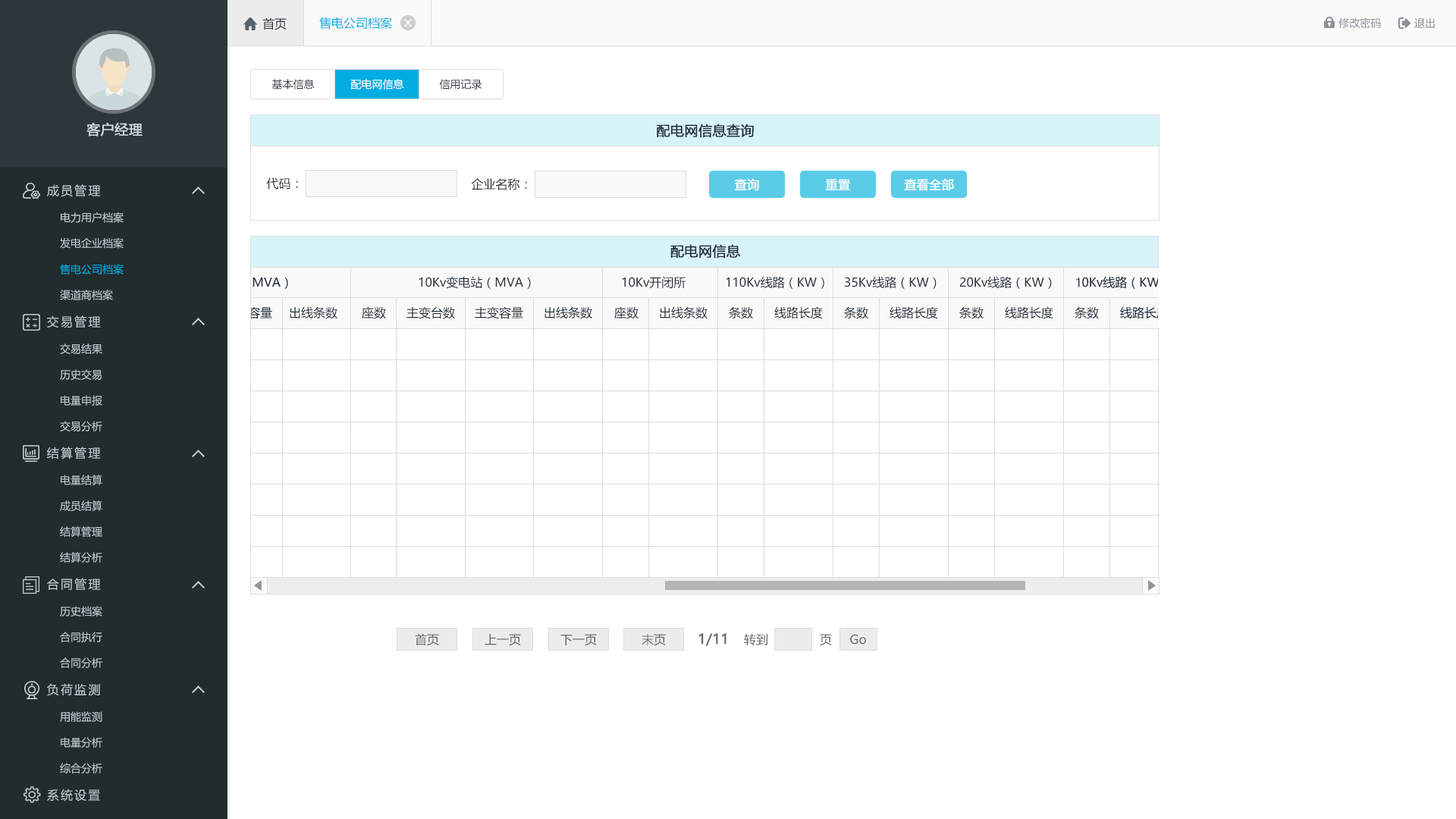
<style>
.page{position:relative;width:1456px;height:819px;background:#ffffff}
.page>*{position:absolute;margin:0}
.t1{font:12.1px "MicrosoftYaHei";color:#242e3b}
.t2{font:12.1px "MicrosoftYaHei";color:#00ace2}
.t3{font:10.6px "MicrosoftYaHei";color:#8a8f99}
.t4{font:10.6px "MicrosoftYaHei";color:#242e3b}
.t5{font:10.6px "MicrosoftYaHei";color:#ffffff}
.t6{font:13.6px "MicrosoftYaHei";color:#d1dce2;font-weight:bold}
.t7{font:13.6px "MicrosoftYaHei";color:#242e3b;font-weight:bold}
.t8{font:12.1px "MicrosoftYaHei";letter-spacing:0.14em;color:#c2cdd2}
.t9{font:12.1px "MicrosoftYaHei";color:#333333}
.t10{font:12.1px "MicrosoftYaHei";color:#ffffff;font-weight:bold}
.t11{font:10.6px "MicrosoftYaHei";color:#c2cdd2}
.t12{font:10.6px "MicrosoftYaHei";color:#00ace2}
.t13{font:12.1px "MicrosoftYaHei";color:#61656b}
.t14{font:13.6px "MicrosoftYaHei";color:#61656b;font-weight:bold}
</style>
<div class="page">
<p class="t1" style="left:262px;top:17px;width:25px;height:13px">首页</p>
<p class="t2" style="left:319px;top:17px;width:73px;height:13px">售电公司档案</p>
<p class="t3" style="left:1338px;top:17px;width:43px;height:12px">修改密码</p>
<p class="t3" style="left:1414px;top:17px;width:21px;height:11px">退出</p>
<p class="t4" style="left:271px;top:79px;width:44px;height:10px">基本信息</p>
<p class="t5" style="left:350px;top:79px;width:54px;height:10px">配电网信息</p>
<p class="t4" style="left:439px;top:79px;width:43px;height:10px">信用记录</p>
<p class="t6" style="left:86px;top:122px;width:57px;height:14px">客户经理</p>
<p class="t7" style="left:656px;top:124px;width:98px;height:14px">配电网信息查询</p>
<p class="t8" style="left:47px;top:184px;width:54px;height:13px">成员管理</p>
<p class="t9" style="left:266px;top:177px;width:32px;height:13px">代码：</p>
<p class="t9" style="left:471px;top:178px;width:56px;height:12px">企业名称：</p>
<p class="t10" style="left:734px;top:178px;width:25px;height:12px">查询</p>
<p class="t10" style="left:825px;top:180px;width:26px;height:12px">重置</p>
<p class="t10" style="left:825px;top:179px;width:26px;height:11px">重置</p>
<p class="t10" style="left:904px;top:178px;width:50px;height:13px">查看全部</p>
<p class="t11" style="left:61px;top:212px;width:63px;height:11px">电力用户档案</p>
<p class="t11" style="left:60px;top:237px;width:64px;height:12px">发电企业档案</p>
<p class="t7" style="left:670px;top:244px;width:71px;height:15px">配电网信息</p>
<p class="t12" style="left:60px;top:264px;width:64px;height:11px">售电公司档案</p>
<p class="t1" style="left:419px;top:276px;width:112px;height:13px">10Kv变电站（MVA）</p>
<p class="t1" style="left:622px;top:276px;width:64px;height:13px">10Kv开闭所</p>
<p class="t1" style="left:726px;top:276px;width:98px;height:13px">110Kv线路（KW）</p>
<p class="t1" style="left:845px;top:276px;width:92px;height:13px">35Kv线路（KW）</p>
<p class="t1" style="left:960px;top:276px;width:92px;height:13px">20Kv线路（KW）</p>
<p class="t1" style="left:1076px;top:278px;width:4px;height:9px">1</p>
<p class="t11" style="left:60px;top:290px;width:53px;height:10px">渠道商档案</p>
<p class="t8" style="left:47px;top:315px;width:54px;height:13px">交易管理</p>
<p class="t1" style="left:290px;top:306px;width:47px;height:13px">出线条数</p>
<p class="t1" style="left:362px;top:306px;width:24px;height:13px">座数</p>
<p class="t1" style="left:406px;top:306px;width:49px;height:13px">主变台数</p>
<p class="t1" style="left:475px;top:306px;width:48px;height:13px">主变容量</p>
<p class="t1" style="left:544px;top:306px;width:48px;height:13px">出线条数</p>
<p class="t1" style="left:614px;top:306px;width:25px;height:13px">座数</p>
<p class="t1" style="left:660px;top:306px;width:48px;height:13px">出线条数</p>
<p class="t1" style="left:729px;top:306px;width:24px;height:13px">条数</p>
<p class="t1" style="left:774px;top:306px;width:49px;height:13px">线路长度</p>
<p class="t1" style="left:844px;top:306px;width:24px;height:13px">条数</p>
<p class="t1" style="left:890px;top:306px;width:48px;height:13px">线路长度</p>
<p class="t1" style="left:959px;top:306px;width:25px;height:13px">条数</p>
<p class="t1" style="left:1005px;top:306px;width:48px;height:13px">线路长度</p>
<p class="t1" style="left:1075px;top:306px;width:24px;height:13px">条数</p>
<p class="t11" style="left:60px;top:344px;width:42px;height:10px">交易结果</p>
<p class="t11" style="left:60px;top:369px;width:42px;height:11px">历史交易</p>
<p class="t11" style="left:61px;top:395px;width:41px;height:11px">电量申报</p>
<p class="t11" style="left:60px;top:421px;width:42px;height:10px">交易分析</p>
<p class="t8" style="left:47px;top:447px;width:54px;height:13px">结算管理</p>
<p class="t11" style="left:61px;top:475px;width:41px;height:10px">电量结算</p>
<p class="t11" style="left:60px;top:500px;width:42px;height:11px">成员结算</p>
<p class="t11" style="left:60px;top:526px;width:42px;height:11px">结算管理</p>
<p class="t11" style="left:60px;top:552px;width:42px;height:11px">结算分析</p>
<p class="t8" style="left:47px;top:578px;width:54px;height:12px">合同管理</p>
<p class="t11" style="left:60px;top:606px;width:42px;height:11px">历史档案</p>
<p class="t11" style="left:60px;top:632px;width:42px;height:10px">合同执行</p>
<p class="t13" style="left:415px;top:633px;width:24px;height:13px">首页</p>
<p class="t13" style="left:485px;top:634px;width:36px;height:12px">上一页</p>
<p class="t13" style="left:560px;top:634px;width:37px;height:12px">下一页</p>
<p class="t13" style="left:642px;top:633px;width:24px;height:13px">末页</p>
<p class="t14" style="left:698px;top:633px;width:28px;height:13px">1/11</p>
<p class="t13" style="left:744px;top:633px;width:23px;height:12px">转到</p>
<p class="t13" style="left:820px;top:634px;width:12px;height:12px">页</p>
<p class="t13" style="left:850px;top:634px;width:16px;height:11px">Go</p>
<p class="t11" style="left:60px;top:657px;width:42px;height:11px">合同分析</p>
<p class="t8" style="left:47px;top:683px;width:53px;height:13px">负荷监测</p>
<p class="t11" style="left:60px;top:711px;width:42px;height:11px">用能监测</p>
<p class="t11" style="left:61px;top:737px;width:41px;height:11px">电量分析</p>
<p class="t11" style="left:60px;top:763px;width:42px;height:10px">综合分析</p>
<p class="t8" style="left:47px;top:789px;width:53px;height:13px">系统设置</p>
</div>
